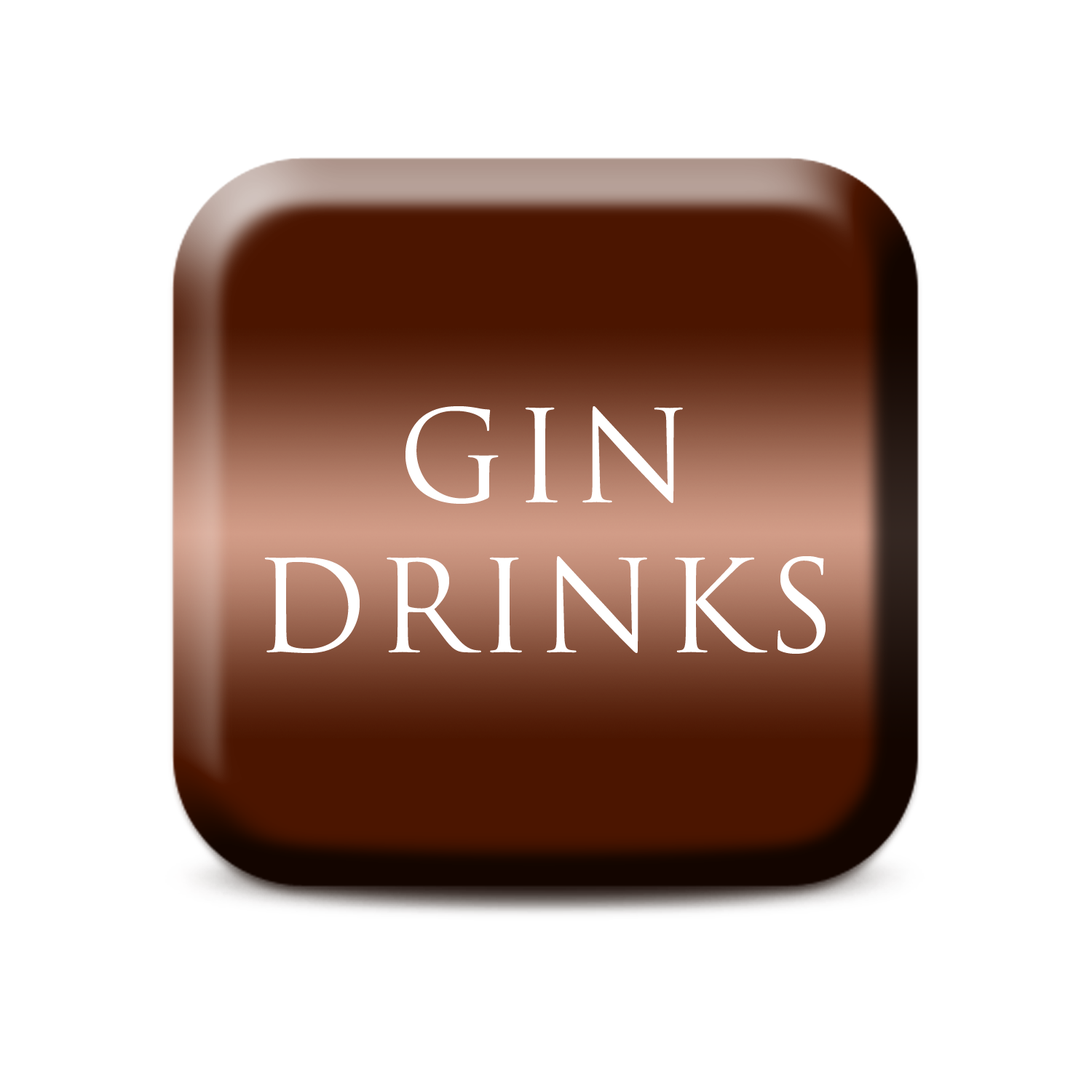
<style>
.page{position:relative;width:1092px;height:1092px;background:#ffffff}
.page>*{position:absolute;margin:0}
.t1{font:124.5px "TrajanPro-Regular";letter-spacing:0.06em;color:#ffffff}
</style>
<div class="page">
<p class="t1" style="left:264px;top:406px;width:562px;height:248px;text-align:center">GIN<br>DRINKS</p>
</div>
